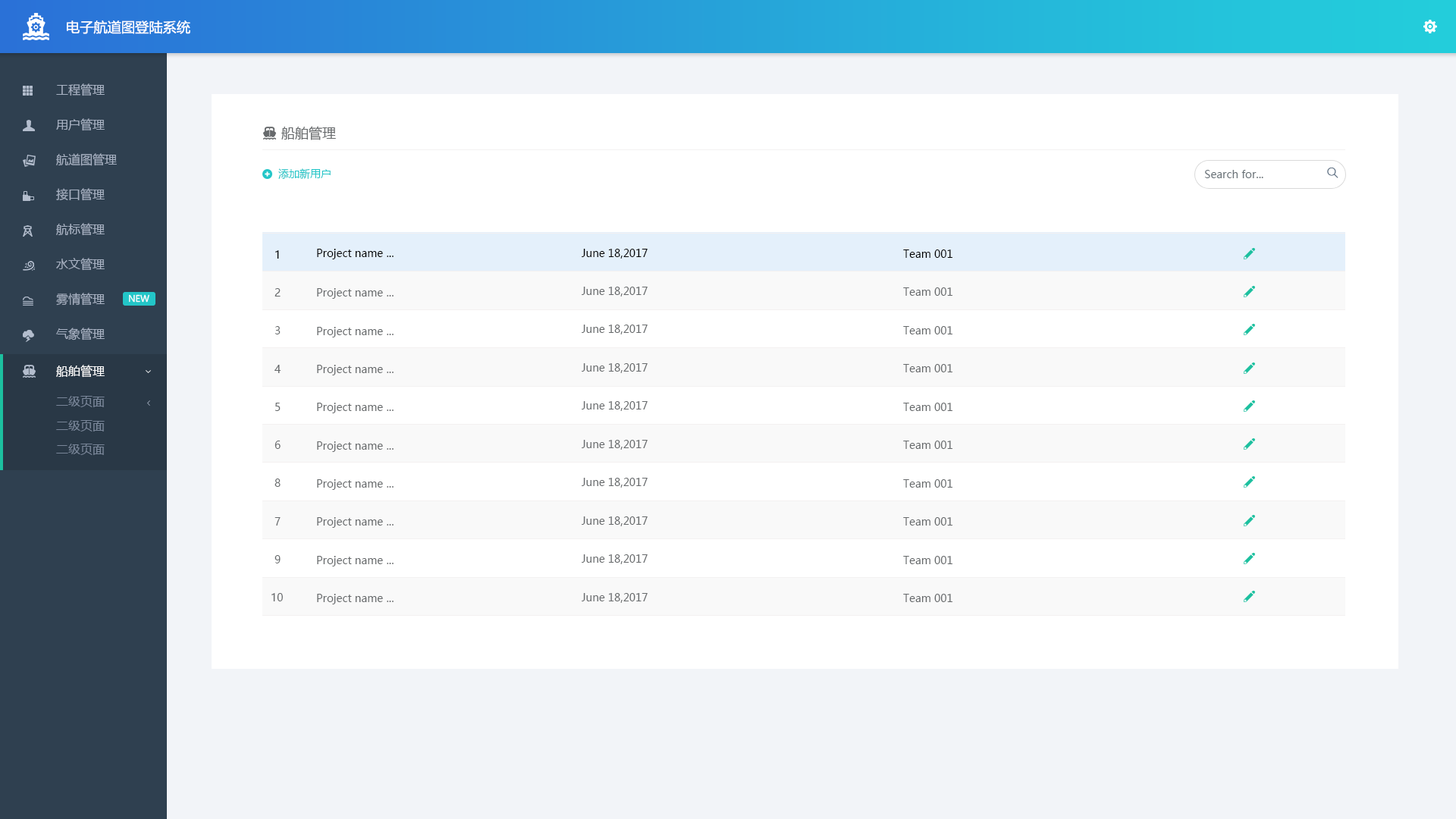
<style>
.page{position:relative;width:1456px;height:819px;background:#ffffff}
.page>*{position:absolute;margin:0}
.t1{font:13.6px "MicrosoftYaHei";color:#ffffff}
.t2{font:12.1px/34.9px "MicrosoftYaHei";color:#a7b1c2}
.t3{font:13.6px "MicrosoftYaHei";color:#676a6c}
.t4{font:10.6px "MicrosoftYaHei";color:#23c6c8}
.t5{font:10.6px "MicrosoftYaHeiUI";color:#000000}
.t6{font:10.6px "MicrosoftYaHei";color:#000000}
.t7{font:10.6px "MicrosoftYaHeiUI";color:#676a6c}
.t8{font:10.6px "MicrosoftYaHei";color:#676a6c}
.t9{font:8.9px "MicrosoftYaHei";color:#ffffff}
.t10{font:12.1px "MicrosoftYaHei";color:#ffffff}
.t11{font:12.1px "MicrosoftYaHei";color:#798699}
</style>
<div class="page">
<p class="t1" style="left:67px;top:20px;width:123px;height:14px">电子航道图登陆系统</p>
<p class="t2" style="left:56px;top:83px;width:61px;height:257px">工程管理<br>用户管理<br>航道图管理<br>接口管理<br>航标管理<br>水文管理<br>雾情管理<br>气象管理</p>
<p class="t3" style="left:281px;top:126px;width:55px;height:14px">船舶管理</p>
<p class="t4" style="left:278px;top:168px;width:53px;height:11px">添加新用户</p>
<p class="t5" style="left:275px;top:250px;width:4px;height:9px">1</p>
<p class="t6" style="left:317px;top:249px;width:77px;height:10px">Project name ...</p>
<p class="t6" style="left:582px;top:249px;width:66px;height:10px">June 18,2017</p>
<p class="t6" style="left:903px;top:249px;width:49px;height:9px">Team 001</p>
<p class="t7" style="left:275px;top:288px;width:6px;height:9px">2</p>
<p class="t8" style="left:317px;top:288px;width:77px;height:11px">Project name ...</p>
<p class="t8" style="left:582px;top:287px;width:66px;height:10px">June 18,2017</p>
<p class="t8" style="left:903px;top:287px;width:49px;height:9px">Team 001</p>
<p class="t9" style="left:129px;top:294px;width:20px;height:9px">NEW</p>
<p class="t7" style="left:275px;top:326px;width:6px;height:8px">3</p>
<p class="t8" style="left:317px;top:327px;width:77px;height:10px">Project name ...</p>
<p class="t8" style="left:582px;top:325px;width:66px;height:9px">June 18,2017</p>
<p class="t8" style="left:903px;top:326px;width:49px;height:8px">Team 001</p>
<p class="t10" style="left:56px;top:365px;width:49px;height:13px">船舶管理</p>
<p class="t7" style="left:275px;top:365px;width:6px;height:8px">4</p>
<p class="t8" style="left:317px;top:365px;width:77px;height:10px">Project name ...</p>
<p class="t8" style="left:582px;top:363px;width:66px;height:10px">June 18,2017</p>
<p class="t8" style="left:903px;top:364px;width:49px;height:8px">Team 001</p>
<p class="t11" style="left:56px;top:396px;width:49px;height:11px">二级页面</p>
<p class="t8" style="left:582px;top:401px;width:66px;height:10px">June 18,2017</p>
<p class="t7" style="left:275px;top:403px;width:6px;height:8px">5</p>
<p class="t8" style="left:317px;top:403px;width:77px;height:10px">Project name ...</p>
<p class="t8" style="left:903px;top:403px;width:49px;height:8px">Team 001</p>
<p class="t11" style="left:56px;top:420px;width:49px;height:11px">二级页面</p>
<p class="t11" style="left:56px;top:444px;width:49px;height:11px">二级页面</p>
<p class="t7" style="left:275px;top:441px;width:6px;height:8px">6</p>
<p class="t8" style="left:317px;top:441px;width:77px;height:11px">Project name ...</p>
<p class="t8" style="left:582px;top:440px;width:66px;height:10px">June 18,2017</p>
<p class="t8" style="left:903px;top:441px;width:49px;height:8px">Team 001</p>
<p class="t7" style="left:275px;top:479px;width:6px;height:8px">8</p>
<p class="t8" style="left:317px;top:479px;width:77px;height:11px">Project name ...</p>
<p class="t8" style="left:582px;top:478px;width:66px;height:10px">June 18,2017</p>
<p class="t8" style="left:903px;top:479px;width:49px;height:9px">Team 001</p>
<p class="t7" style="left:275px;top:517px;width:6px;height:9px">7</p>
<p class="t8" style="left:317px;top:517px;width:77px;height:11px">Project name ...</p>
<p class="t8" style="left:582px;top:516px;width:66px;height:10px">June 18,2017</p>
<p class="t8" style="left:903px;top:517px;width:49px;height:9px">Team 001</p>
<p class="t7" style="left:275px;top:555px;width:6px;height:8px">9</p>
<p class="t8" style="left:317px;top:556px;width:77px;height:10px">Project name ...</p>
<p class="t8" style="left:582px;top:554px;width:66px;height:10px">June 18,2017</p>
<p class="t8" style="left:903px;top:556px;width:49px;height:8px">Team 001</p>
<p class="t7" style="left:271px;top:593px;width:12px;height:8px">10</p>
<p class="t8" style="left:317px;top:594px;width:77px;height:10px">Project name ...</p>
<p class="t8" style="left:582px;top:593px;width:66px;height:10px">June 18,2017</p>
<p class="t8" style="left:903px;top:594px;width:49px;height:8px">Team 001</p>
</div>
